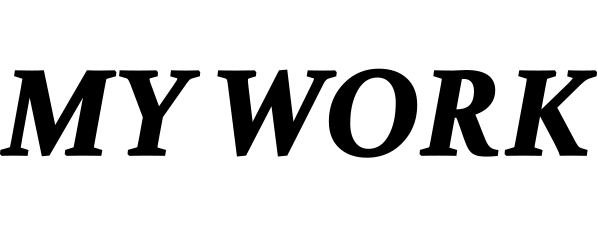
<style>
.page{position:relative;width:598px;height:237px;background:#ffffff}
.page>*{position:absolute;margin:0}
.t1{font:120px "Constantia-BoldItalic";letter-spacing:-0.04em;color:#000000;text-transform:uppercase;font-weight:bold;scale:0.96 1}
</style>
<div class="page">
<p class="t1" style="left:0px;top:68px;width:598px;height:90px">MY WORK</p>
</div>
